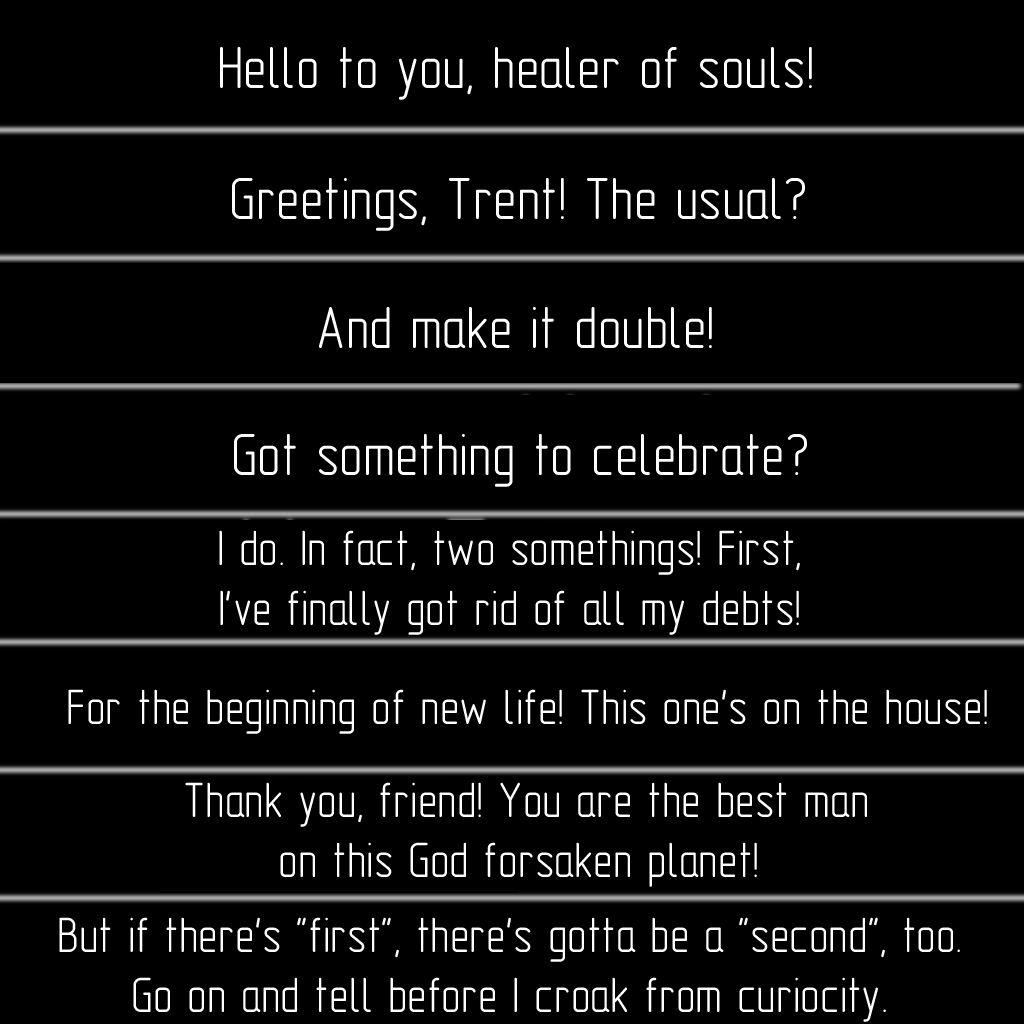
<style>
.page{position:relative;width:1024px;height:1024px;background:#000000}
.page>*{position:absolute;margin:0}
.t1{font:60px "GOST-2.304-81typeA";color:#ffffff}
.t2{font:50px "GOST-2.304-81typeA";color:#ffffff}
</style>
<div class="page">
<p class="t1" style="left:220px;top:47px;width:592px;height:53px">Hello to you, healer of souls!</p>
<p class="t1" style="left:232px;top:178px;width:573px;height:53px">Greetings, Trent! The usual?</p>
<p class="t1" style="left:319px;top:307px;width:393px;height:41px">And make it double!</p>
<p class="t1" style="left:234px;top:434px;width:573px;height:53px">Got something to celebrate?</p>
<p class="t2" style="left:219px;top:530px;width:581px;height:105px;text-align:center">I do. In fact, two somethings! First,<br>I've finally got rid of all my debts!</p>
<p class="t2" style="left:68px;top:689px;width:919px;height:45px">For the beginning of new life! This one's on the house!</p>
<p class="t2" style="left:185px;top:782px;width:682px;height:105px;text-align:center">Thank you, friend! You are the best man<br>on this God forsaken planet!</p>
<p class="t2" style="left:59px;top:917px;width:901px;height:105px;text-align:center">But if there's "first", there's gotta be a "second", too.<br>Go on and tell before I croak from curiocity.</p>
</div>
